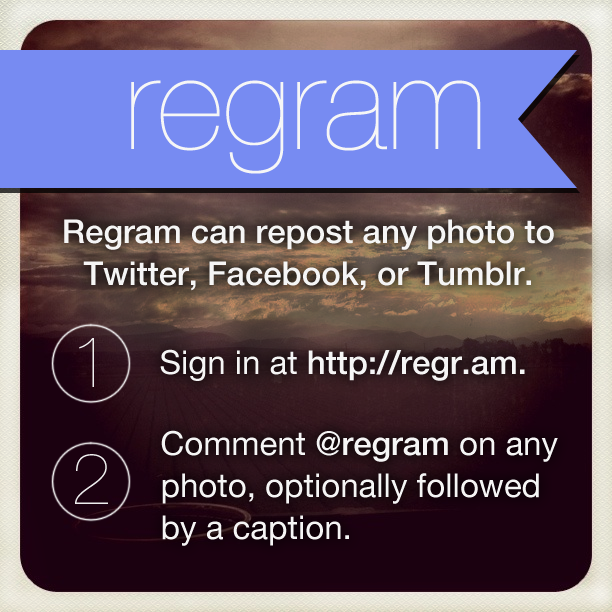
<style>
.page{position:relative;width:612px;height:612px}
.page>*{position:absolute;margin:0}
.t1{font:130px "HelveticaNeue-UltraLight";color:#f6f6f6}
.t2{font:33px/42px "HelveticaNeue-Medium";color:#eeeeee}
.t3{font:72px "HelveticaNeue-UltraLight";color:#eeeeee}
.t4{font:33px "HelveticaNeue-Medium";color:#eeeeee}
.t5{font:33px "HelveticaNeue";color:#eeeeee}
.t6{font:33px/42px "HelveticaNeue";color:#eeeeee}
</style>
<div class="page">
<p class="t1" style="left:131px;top:80px;width:350px;height:94px">regram</p>
<p class="t2" style="left:64px;top:219px;width:490px;height:72px;text-align:center">Regram can repost any photo to Twitter, Facebook, or Tumblr.</p>
<p class="t3" style="left:79px;top:338px;width:15px;height:49px">1</p>
<p class="t4" style="left:160px;top:349px;width:365px;height:32px"><span class="t5">Sign in at </span>http://regr.am.</p>
<p class="t6" style="left:161px;top:430px;width:397px;height:116px">Comment<span class="t2"> @regram </span>on any photo, optionally followed by a caption.</p>
<p class="t3" style="left:75px;top:454px;width:33px;height:50px">2</p>
</div>
